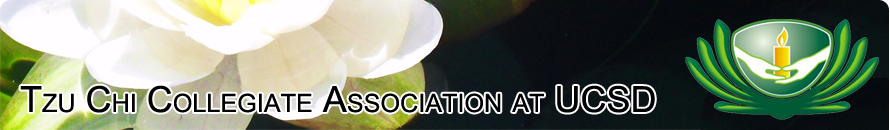
<style>
.page{position:relative;width:890px;height:130px}
.page>*{position:absolute;margin:0}
.t1{font:36px "ArialMT";color:#000000;font-variant:small-caps}
</style>
<div class="page">
<p class="t1" style="left:20px;top:85px;width:635px;height:28px">Tzu Chi Collegiate Association at UCSD</p>
</div>
